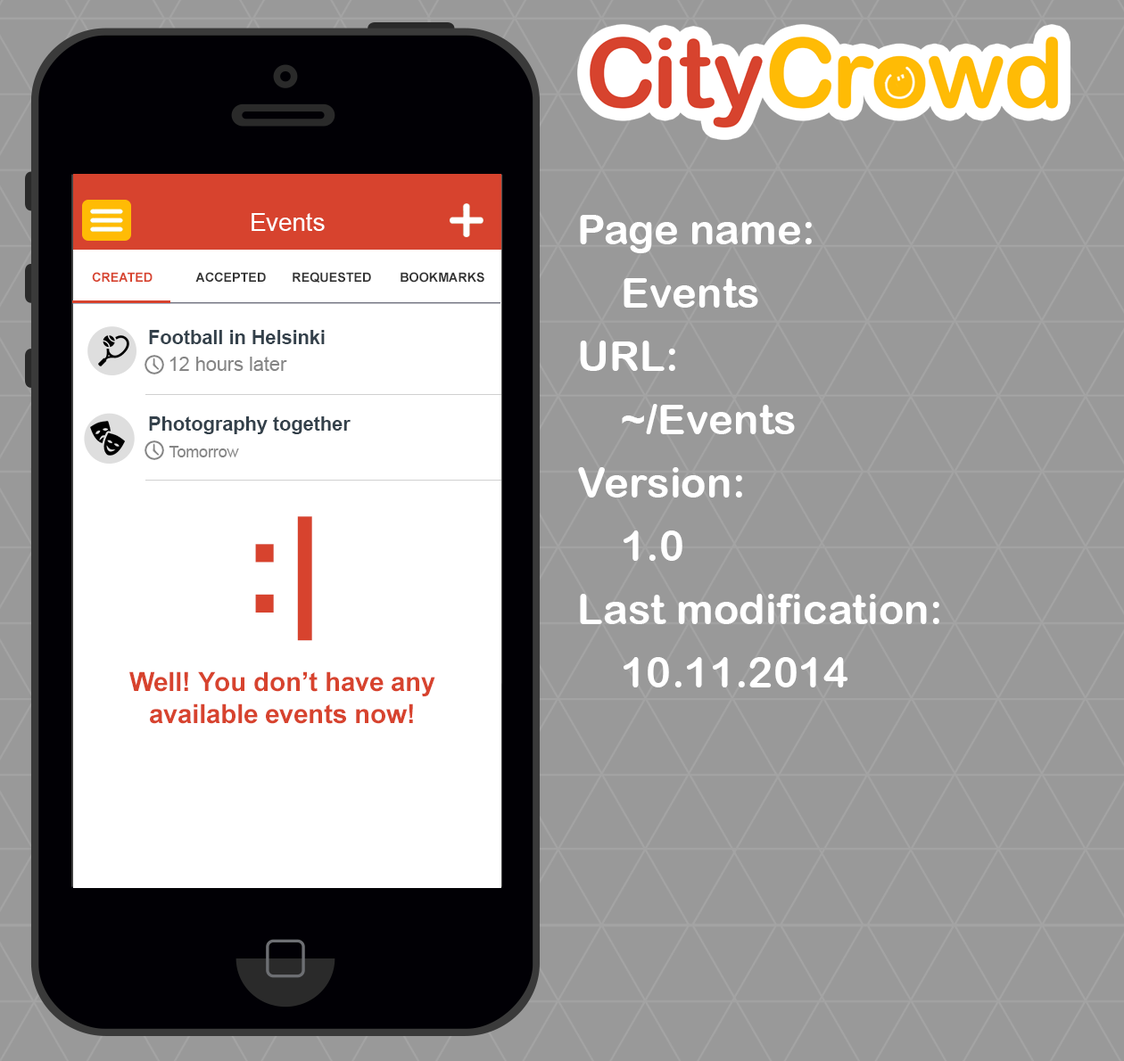
<style>
.page{position:relative;width:1124px;height:1061px;background:#999999}
.page>*{position:absolute;margin:0}
.t1{font:24.6px "ArialMT";color:#ffffff}
.t2{font:42.2px/63.3px "ArialRoundedMTBold";color:#ffffff}
.t3{font:12.8px "Arial-BoldMT";color:#d7432e;text-transform:uppercase}
.t4{font:12.8px "Arial-BoldMT";color:#333333;text-transform:uppercase}
.t5{font:19.3px "Arial-BoldMT";color:#34414b}
.t6{font:19.3px "ArialMT";color:#858585}
.t7{font:15.8px "ArialMT";color:#858585}
.t8{font:26.4px "Arial-BoldMT";color:#d7432e}
.t9{font:131.9px/79.1px "Arial-BoldMT";color:#d7432e}
.t10{font:26.4px/79.1px "Arial-BoldMT";color:#d7432e}
</style>
<div class="page">
<p class="t1" style="left:251px;top:213px;width:74px;height:18px">Events</p>
<p class="t2" style="left:578px;top:215px;width:361px;height:473px">Page name:<br>Events<br>URL:<br>~/Events<br>Version:<br>1.0<br>Last modification:<br>10.11.2014</p>
<p class="t3" style="left:92px;top:272px;width:60px;height:10px">CREATED</p>
<p class="t4" style="left:195px;top:272px;width:71px;height:10px">ACCEPTED</p>
<p class="t4" style="left:293px;top:272px;width:78px;height:11px">REQUESTED</p>
<p class="t4" style="left:400px;top:272px;width:84px;height:11px">BOOKMARKs</p>
<p class="t5" style="left:149px;top:330px;width:176px;height:14px">Football in Helsinki</p>
<p class="t6" style="left:169px;top:357px;width:118px;height:14px">12 hours later</p>
<p class="t5" style="left:149px;top:416px;width:201px;height:18px">Photography together</p>
<p class="t7" style="left:169px;top:446px;width:70px;height:11px">Tomorrow</p>
<p class="t8" style="left:129px;top:516px;width:306px;height:208px;text-align:center"><span class="t9">:|<br></span><span class="t10">Well</span>! You don’t have any<br>available events now!</p>
</div>
